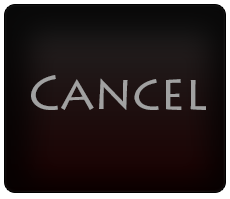
<style>
.page{position:relative;width:230px;height:199px}
.page>*{position:absolute;margin:0}
.t1{font:48px "LithosPro-Regular";color:#a1a1a1}
</style>
<div class="page">
<p class="t1" style="left:31px;top:75px;width:175px;height:35px">Cancel</p>
</div>
